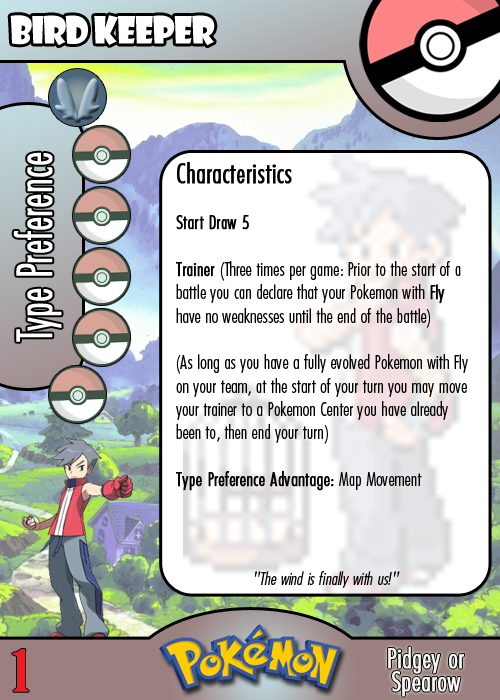
<style>
.page{position:relative;width:500px;height:700px;background:#ffffff}
.page>*{position:absolute;margin:0}
.t1{font:36.7px "ShowcardGothic-Reg";letter-spacing:-0.025em;color:#ffffff;scale:0.91 1}
.t2{font:46.7px "Futura-CondensedLight";color:#ffffff;font-weight:bold;scale:0.83 1}
.t3{font:19.4px "FuturaCondensedBQ-Light";color:#010101}
.t4{font:27.8px "FuturaCondensedBQ-Light";color:#010101;font-weight:bold}
.t5{font:19.4px "FuturaCondensedBQ-Light";color:#010101;font-weight:bold}
.t6{font:18.1px "FuturaCondensedBQ-Light";color:#010101;font-style:italic}
.t7{font:55.6px "BirchStd";color:#ed1c24;font-weight:bold;scale:1.5 1}
.t8{font:27.8px "FuturaCondensedBQ-Light";color:#f9f9f9;font-weight:bold}
</style>
<div class="page">
<p class="t1" style="left:10px;top:15px;width:205px;height:31px">Bird Keeper</p>
<p class="t2" style="left:13px;top:152px;width:49px;height:190px;rotate:-90deg">Type Preference</p>
<p class="t3" style="left:176px;top:162px;width:292px;height:329px"><span class="t4">Characteristics<br></span><span class="t5"><br>Start Draw 5<br><br>Trainer </span>(Three times per game: Prior to the start of a battle you can declare that your Pokemon with <span class="t5">Fly </span>have no weaknesses until the end of the battle)<br><br>(As long as you have a fully evolved Pokemon with Fly on your team, at the start of your turn you may move your trainer to a Pokemon Center you have already been to, then end your turn)<br><br><span class="t5">Type Preference Advantage:</span> Map Movement</p>
<p class="t6" style="left:255px;top:571px;width:145px;height:17px">"The wind is finally with us!"</p>
<p class="t7" style="left:12px;top:649px;width:17px;height:43px">1</p>
<p class="t8" style="left:388px;top:646px;width:76px;height:28px">Pidgey or</p>
<p class="t8" style="left:392px;top:671px;width:69px;height:26px">Spearow</p>
</div>
